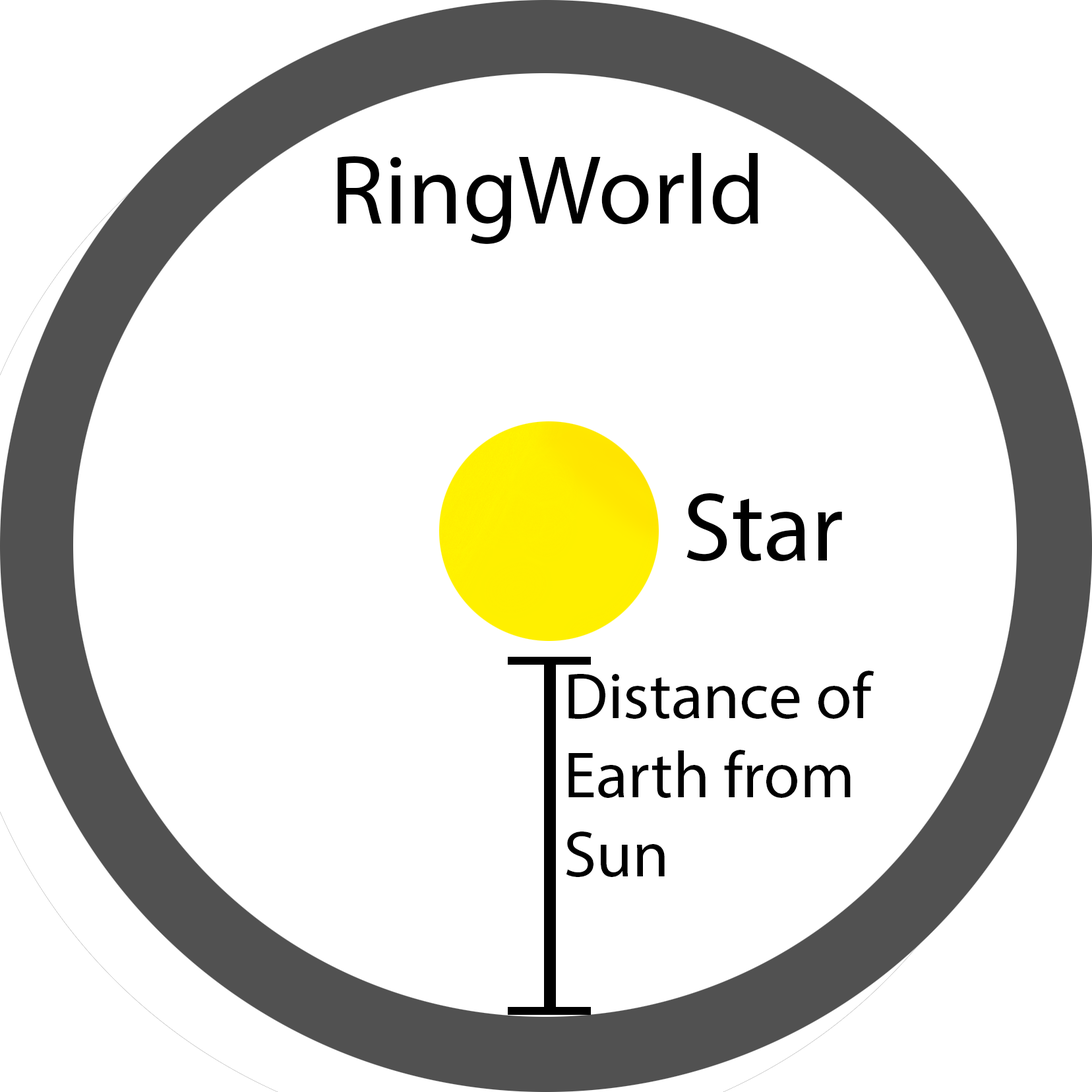
<style>
.page{position:relative;width:1092px;height:1092px;background:#ffffff}
.page>*{position:absolute;margin:0}
.t1{font:98.9px "MyriadPro-Regular";color:#000000}
.t2{font:65.9px "MyriadPro-Regular";color:#000000}
</style>
<div class="page">
<p class="t1" style="left:338px;top:153px;width:420px;height:91px">RingWorld</p>
<p class="t1" style="left:686px;top:493px;width:156px;height:68px">Star</p>
<p class="t2" style="left:566px;top:671px;width:308px;height:206px">Distance of <br>Earth from <br>Sun</p>
</div>
